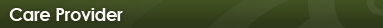
<style>
.page{position:relative;width:383px;height:28px}
.page>*{position:absolute;margin:0}
.t1{font:18px "CenturyGothic-Bold";letter-spacing:-0.025em;color:#faf7f5}
</style>
<div class="page">
<p class="t1" style="left:9px;top:8px;width:114px;height:13px">Care Provider</p>
</div>
